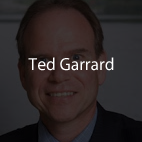
<style>
.page{position:relative;width:142px;height:142px}
.page>*{position:absolute;margin:0}
.t1{font:17.5px "MyriadPro-Regular";color:#ffffff}
</style>
<div class="page">
<p class="t1" style="left:28px;top:57px;width:86px;height:14px">Ted Garrard</p>
</div>
